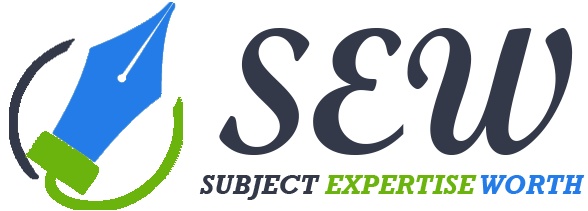
<style>
.page{position:relative;width:588px;height:211px;background:#ffffff}
.page>*{position:absolute;margin:0}
.t1{font:179.4px "ScriptMTBold";color:#333949}
.t2{font:27.2px "Rockwell-BoldItalic";color:#6bb30d}
.t3{font:27.2px "Rockwell-BoldItalic";color:#333949}
.t4{font:27.2px "Rockwell-BoldItalic";color:#247ce8}
</style>
<div class="page">
<p class="t1" style="left:219px;top:28px;width:354px;height:127px">SEW</p>
<p class="t2" style="left:199px;top:175px;width:386px;height:25px"><span class="t3">SUBJECT </span>EXPERTISE <span class="t4">WORTH</span></p>
</div>
